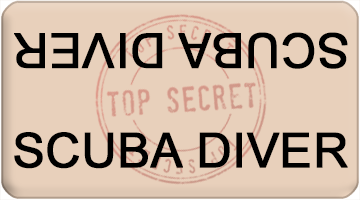
<style>
.page{position:relative;width:360px;height:200px;background:#e8d0bb}
.page>*{position:absolute;margin:0}
.t1{font:48px "ArialMT";color:#000000;font-weight:bold}
</style>
<div class="page">
<p class="t1" style="left:14px;top:32px;width:334px;height:37px;rotate:180deg">SCUBA DIVER</p>
<p class="t1" style="left:14px;top:132px;width:334px;height:37px">SCUBA DIVER</p>
</div>
